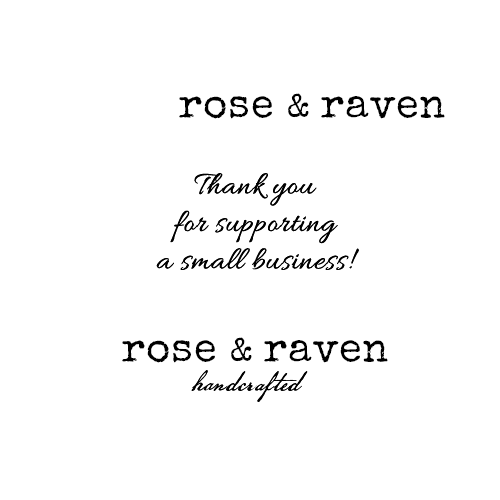
<style>
.page{position:relative;width:500px;height:500px;background:#ffffff}
.page>*{position:absolute;margin:0}
.t1{font:41.7px "SpecialElite-Regular";letter-spacing:0.02em;color:#000000}
.t2{font:33.3px "SpecialElite-Regular";letter-spacing:-0.08em;color:#000000}
.t3{font:33.3px/37.5px "Allura-Regular";letter-spacing:0.02em;color:#000000}
.t4{font:33.3px "AmericanScribe";letter-spacing:0.02em;color:#000000}
</style>
<div class="page">
<p class="t1" style="left:179px;top:93px;width:266px;height:26px">rose <span class="t2">&amp;</span> raven</p>
<p class="t3" style="left:156px;top:173px;width:203px;height:97px;text-align:center">Thank you<br>for supporting<br>a small business!</p>
<p class="t3" style="left:156px;top:173px;width:203px;height:97px;text-align:center">Thank you<br>for supporting<br>a small business!</p>
<p class="t1" style="left:122px;top:337px;width:266px;height:26px">rose <span class="t2">&amp;</span> raven</p>
<p class="t4" style="left:191px;top:370px;width:117px;height:32px">handcrafted</p>
<p class="t4" style="left:191px;top:370px;width:117px;height:32px">handcrafted</p>
</div>
